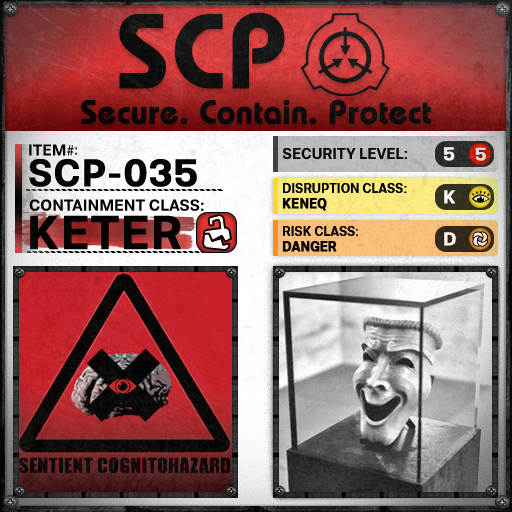
<style>
.page{position:relative;width:512px;height:512px}
.page>*{position:absolute;margin:0}
.t1{font:105.8px "BauhausLT-Demi";color:#000000;font-weight:bold}
.t2{font:33px "BauhausLT-Demi";color:#000000;font-weight:bold}
.t3{font:15.7px "Molde-Semibold";color:#000000}
.t4{font:15.7px "MyriadPro-Regular";color:#000000}
.t5{font:13.7px "Molde-Semibold";color:#000000}
.t6{font:15px "Molde-Semibold";color:#000000}
.t7{font:18.6px "Molde-Semibold";color:#ffffff;font-weight:bold}
.t8{font:17.8px "Molde-Semibold";color:#dadada;font-weight:bold}
.t9{font:38.2px "Molde-Semibold";color:#000000;font-weight:bold}
.t10{font:12.8px "Molde-Semibold";color:#000000}
.t11{font:12.8px "Molde-Semibold";color:#000000;font-weight:bold}
.t12{font:15.9px "Molde-Semibold";color:#000000}
.t13{font:47.2px "Molde-Semibold";color:#000000;font-weight:bold}
</style>
<div class="page">
<p class="t1" style="left:119px;top:12px;width:166px;height:77px">SCP</p>
<p class="t2" style="left:81px;top:99px;width:350px;height:26px">Secure. Contain. Protect</p>
<p class="t3" style="left:29px;top:144px;width:45px;height:12px">ITEM<span class="t4">#</span></p>
<p class="t5" style="left:75px;top:147px;width:2px;height:8px">:</p>
<p class="t6" style="left:283px;top:148px;width:124px;height:11px">SECURITY LEVEL:</p>
<p class="t7" style="left:443px;top:147px;width:12px;height:14px">5</p>
<p class="t8" style="left:475px;top:147px;width:11px;height:14px">5</p>
<p class="t9" style="left:29px;top:159px;width:168px;height:28px">SCP-035</p>
<p class="t10" style="left:282px;top:183px;width:125px;height:28px">DISRUPTION CLASS:<br><span class="t11">KENEQ</span></p>
<p class="t7" style="left:444px;top:190px;width:12px;height:14px">K</p>
<p class="t12" style="left:29px;top:199px;width:175px;height:12px">CONTAINMENT CLASS:</p>
<p class="t13" style="left:30px;top:215px;width:151px;height:35px">KETER</p>
<p class="t10" style="left:282px;top:226px;width:76px;height:26px">RISK CLASS:<br><span class="t11">DANGER</span></p>
<p class="t7" style="left:444px;top:232px;width:12px;height:14px">D</p>
</div>
